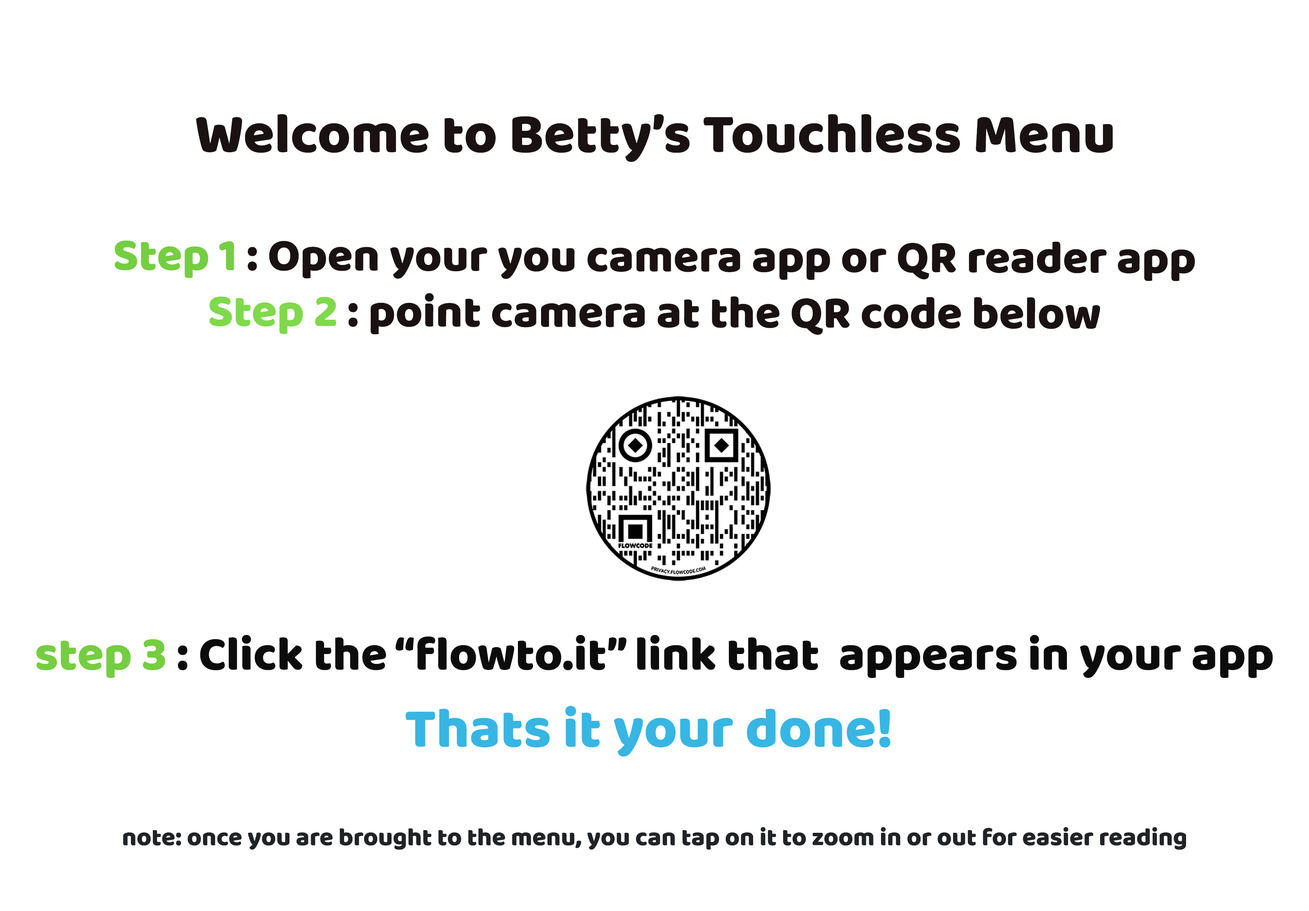
<style>
.page{position:relative;width:1309px;height:911px;background:#ffffff}
.page>*{position:absolute;margin:0}
.t1{font:56.9px "Baloo-Regular";color:#1a1212}
.t2{font:46.4px "Baloo-Regular";color:#1a1212}
.t3{font:46.4px "Baloo-Regular";color:#75ce41}
.t4{font:46.4px "Baloo-Regular";color:#80d94c}
.t5{font:48.3px "Baloo-Regular";color:#0c0c0c}
.t6{font:48.3px "Baloo-Regular";color:#75ce41}
.t7{font:25.3px "Baloo-Regular";color:#212426}
.t8{font:56.9px "Baloo-Regular";color:#37b6e3}
</style>
<div class="page">
<p class="t1" style="left:196px;top:114px;width:917px;height:48px">Welcome to Betty’s Touchless Menu</p>
<p class="t2" style="left:115px;top:240px;width:1080px;height:95px;text-align:center"><span class="t3">Step 1 </span>: Open your you camera app or QR reader app<br><span class="t4">Step 2</span> : point camera at the QR code below</p>
<p class="t5" style="left:36px;top:635px;width:1237px;height:43px"><span class="t6">step 3 </span>: Click the “flowto.it” link that  appears in your app</p>
<p class="t7" style="left:123px;top:705px;width:1063px;height:145px;text-align:center"><span class="t8">Thats it your done! <br><br></span>note: once you are brought to the menu, you can tap on it to zoom in or out for easier reading</p>
</div>
